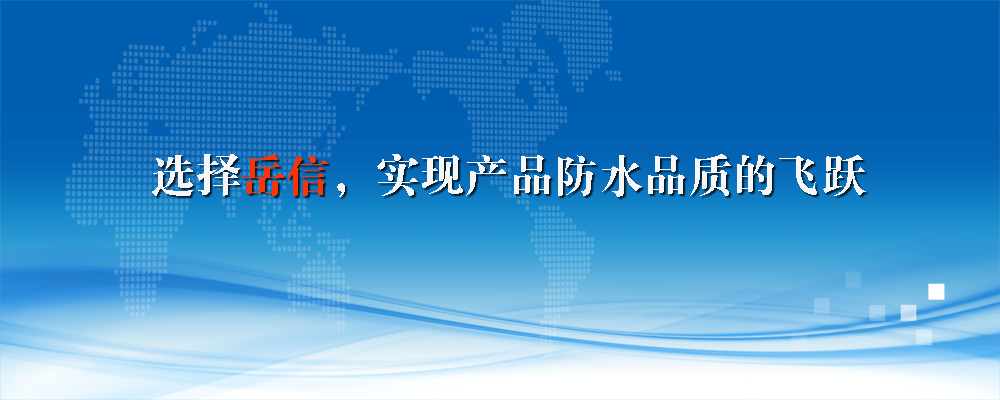
<style>
.page{position:relative;width:1000px;height:400px;background:#005eb0}
.page>*{position:absolute;margin:0}
.t1{font:45.4px "FZDBSJW--GB1-0";color:#f6f6f6}
.t2{font:45.4px "FZDBSJW--GB1-0";color:#f93407}
</style>
<div class="page">
<p class="t1" style="left:152px;top:154px;width:714px;height:43px">选择<span class="t2">岳信</span>，实现产品防水品质的飞跃</p>
</div>
